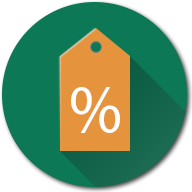
<style>
.page{position:relative;width:192px;height:192px;background:#0c7856}
.page>*{position:absolute;margin:0}
.t1{font:7.6px "MyriadPro-Regular";color:#ffffff}
</style>
<div class="page">
<p class="t1" style="left:71px;top:87px;width:49px;height:46px">%</p>
</div>
